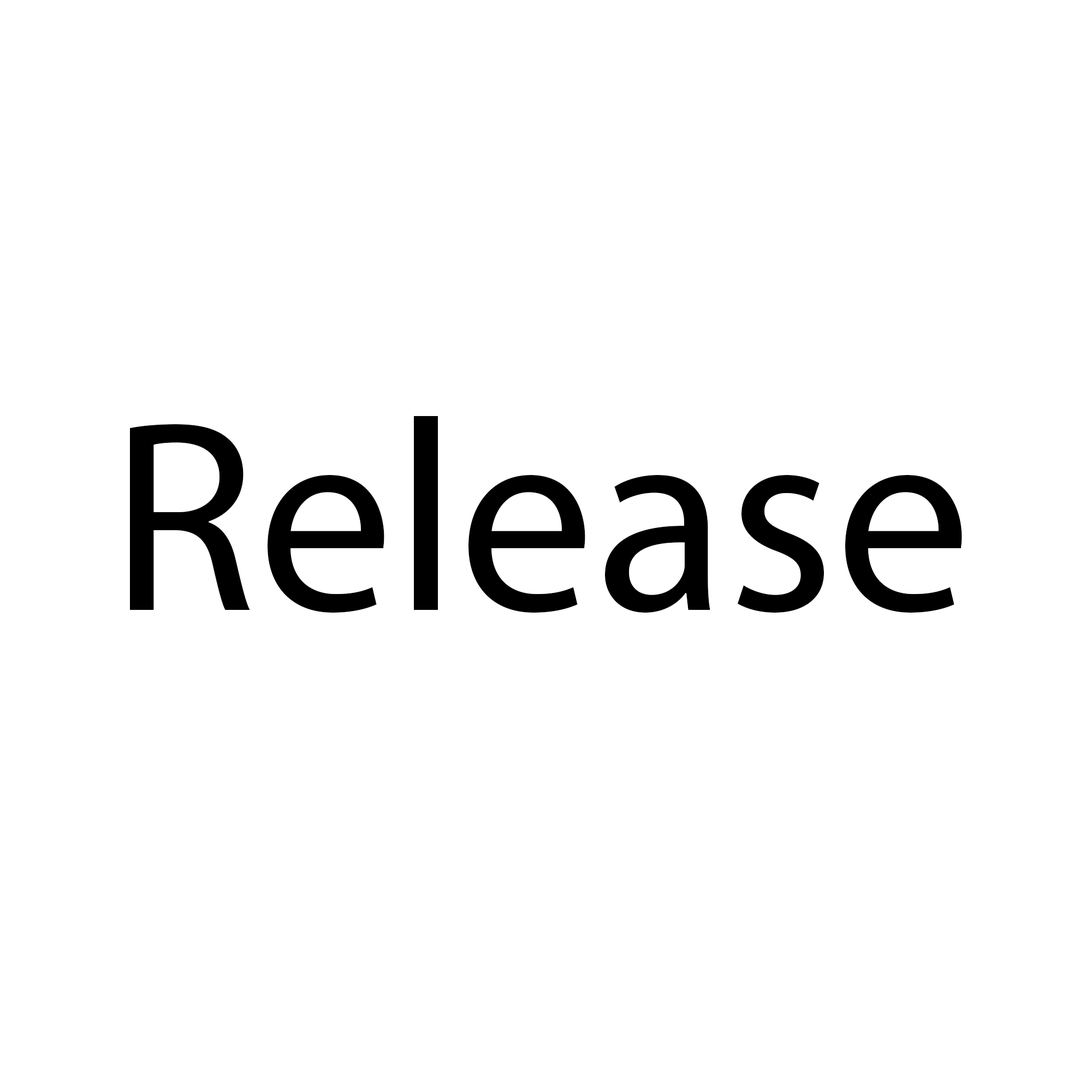
<style>
.page{position:relative;width:1092px;height:1092px;background:#ffffff}
.page>*{position:absolute;margin:0}
.t1{font:273px "MyriadPro-Regular";color:#000000}
</style>
<div class="page">
<p class="t1" style="left:130px;top:416px;width:832px;height:197px">Release</p>
</div>
